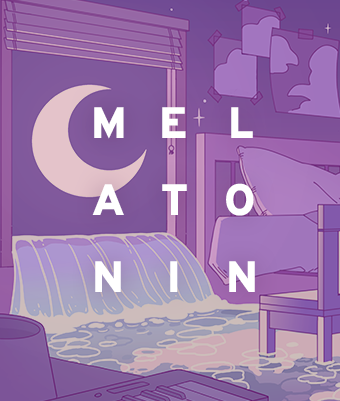
<style>
.page{position:relative;width:340px;height:401px}
.page>*{position:absolute;margin:0}
.t1{font:43.9px "Overpass-Black";letter-spacing:0.83em;color:#ffffff;text-transform:uppercase}
.t2{font:43.9px "Overpass-Black";letter-spacing:0.833em;color:#ffffff;text-transform:uppercase}
.t3{font:43.9px "Overpass-Black";letter-spacing:0.867em;color:#ffffff;text-transform:uppercase}
</style>
<div class="page">
<p class="t1" style="left:94px;top:107px;width:159px;height:32px">mel</p>
<p class="t2" style="left:92px;top:183px;width:162px;height:33px">ato</p>
<p class="t3" style="left:95px;top:261px;width:160px;height:31px">nin</p>
</div>
